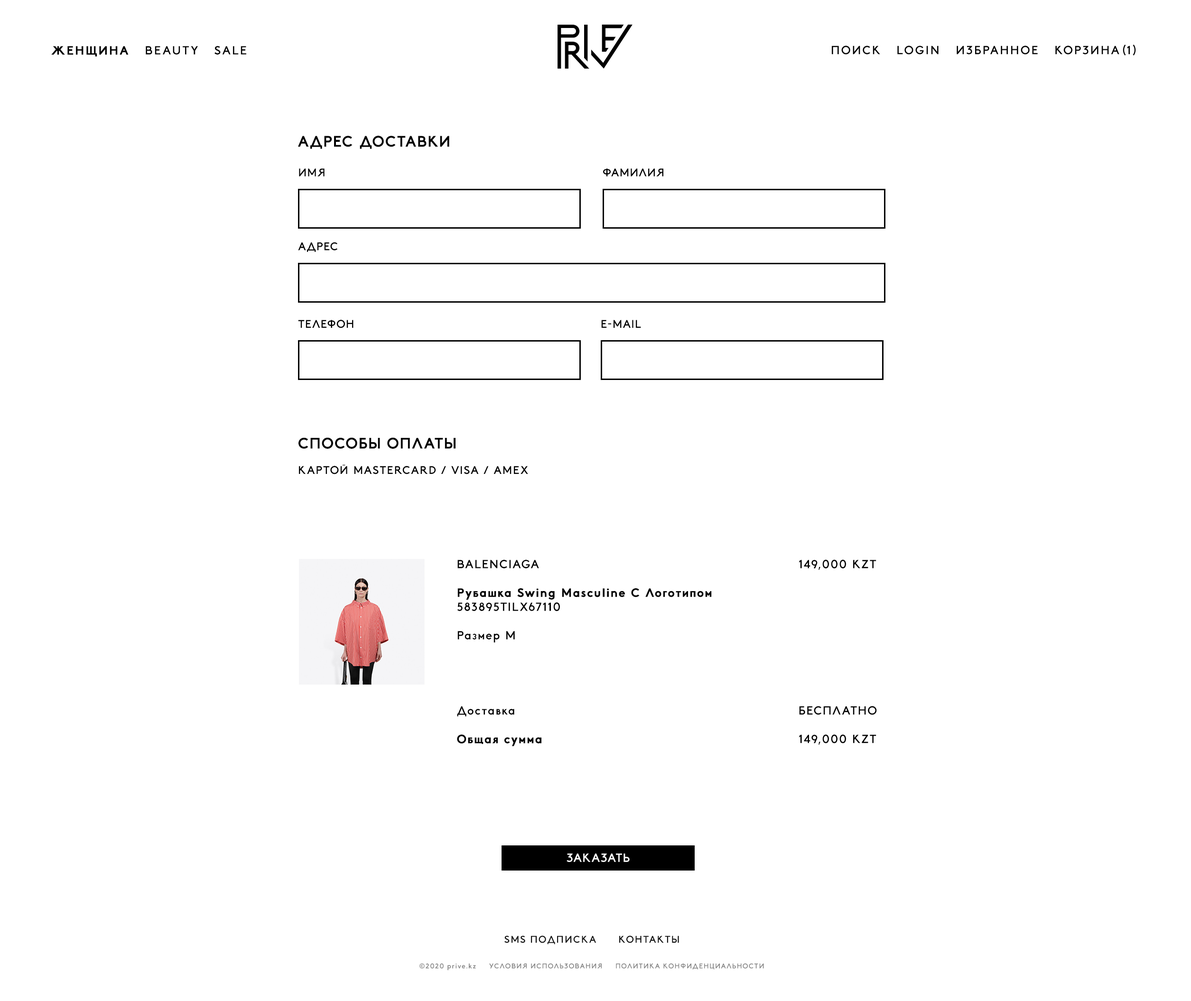
<style>
.page{position:relative;width:1191px;height:1001px;background:#ffffff}
.page>*{position:absolute;margin:0}
.t1{font:31.6px "PriveLogoCheck-Regular";letter-spacing:0.1em;color:#000000}
.t2{font:11.9px "PriveX-Regular";letter-spacing:0.15em;color:#000000;text-transform:uppercase}
.t3{font:11.9px "PriveX-Regular";letter-spacing:0.15em;color:#000000;text-transform:uppercase;font-weight:bold}
.t4{font:14.9px "PriveX-Regular";letter-spacing:0.075em;color:#000000;text-transform:uppercase;font-weight:bold}
.t5{font:11.2px "PriveX-Regular";letter-spacing:0.075em;color:#000000;text-transform:uppercase}
.t6{font:11.2px "PriveXX-RegularX";letter-spacing:0.1em;color:#000000;text-transform:uppercase}
.t7{font:11.9px "PriveX-Regular";letter-spacing:0.1em;color:#000000;text-transform:uppercase}
.t8{font:11.9px "PriveX-Regular";letter-spacing:0.1em;color:#000000;font-weight:bold}
.t9{font:11.9px "PriveX-Regular";letter-spacing:0.1em;color:#000000}
.t10{font:11.9px "PriveX-Regular";letter-spacing:0.075em;color:#ffffff;text-transform:uppercase}
.t11{font:9.9px "PriveX-Regular";letter-spacing:0.1em;color:#121212}
.t12{font:6.9px "PriveX-Regular";letter-spacing:0.1em;color:#848484}
</style>
<div class="page">
<p class="t1" style="left:558px;top:24px;width:75px;height:45px">F</p>
<p class="t2" style="left:51px;top:46px;width:195px;height:10px"><span class="t3">ЖЕНЩИНА </span>  beauty   sale</p>
<p class="t2" style="left:832px;top:45px;width:304px;height:11px">ПОИСК   login   избранное   КОРЗИНА (1)</p>
<p class="t4" style="left:298px;top:136px;width:151px;height:13px">Адрес доставки</p>
<p class="t5" style="left:299px;top:168px;width:26px;height:9px">имя</p>
<p class="t5" style="left:603px;top:168px;width:60px;height:9px">фамилия</p>
<p class="t5" style="left:298px;top:242px;width:40px;height:10px">Адрес</p>
<p class="t5" style="left:298px;top:320px;width:56px;height:8px">телефон</p>
<p class="t5" style="left:601px;top:320px;width:40px;height:8px">E-MAIL</p>
<p class="t4" style="left:298px;top:437px;width:158px;height:12px">способы оплаты</p>
<p class="t6" style="left:299px;top:465px;width:229px;height:10px">картой MASTERCARD / VISA / AMEX</p>
<p class="t7" style="left:457px;top:559px;width:419px;height:84px">Balenciaga                149,000 kzt<br><br><span class="t8">Рубашка Swing Masculine С Логотипом <br></span><span class="t9">583895TILX67110<br><br>Размер M</span></p>
<p class="t8" style="left:457px;top:706px;width:420px;height:40px"><span class="t9">Доставка                 </span><span class="t7">бесплатно <br></span>Общая сумма               <span class="t7">149,000 kzt</span></p>
<p class="t10" style="left:567px;top:854px;width:63px;height:8px">заказать</p>
<p class="t11" style="left:504px;top:936px;width:175px;height:9px">SMS ПОДПИСКА      КОНТАКТЫ</p>
<p class="t12" style="left:419px;top:963px;width:345px;height:7px">©2020 prive.kz     УСЛОВИЯ ИСПОЛЬЗОВАНИЯ     ПОЛИТИКА КОНФИДЕНЦИАЛЬНОСТИ</p>
</div>
